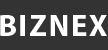
<style>
.page{position:relative;width:108px;height:50px;background:#333333}
.page>*{position:absolute;margin:0}
.t1{font:30.6px "MyriadPro-Bold";letter-spacing:0.05em;color:#ffffff}
</style>
<div class="page">
<p class="t1" style="left:0px;top:15px;width:107px;height:21px">BIZNEX</p>
</div>
